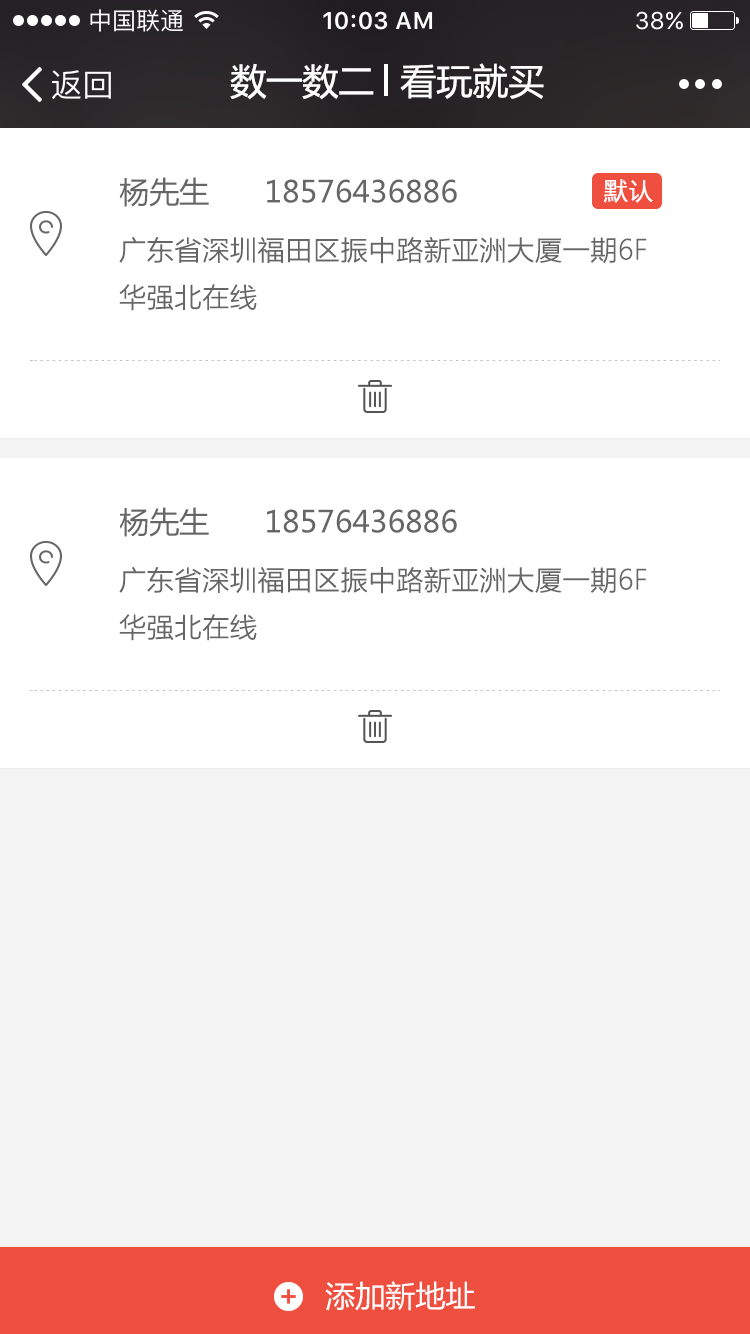
<style>
.page{position:relative;width:750px;height:1334px;background:#ffffff}
.page>*{position:absolute;margin:0}
.t1{font:36px "MicrosoftYaHei";color:#ffffff}
.t2{font:30px "MicrosoftYaHei";color:#666666}
.t3{font:24px "MicrosoftYaHeiLight";color:#ffffff;font-weight:bold}
.t4{font:27px "MicrosoftYaHeiLight";color:#666666;font-weight:bold}
.t5{font:30px "MicrosoftYaHei";color:#ffffff}
</style>
<div class="page">
<p class="t1" style="left:230px;top:63px;width:144px;height:37px">数一数二</p>
<p class="t1" style="left:400px;top:63px;width:144px;height:36px">看玩就买</p>
<p class="t2" style="left:119px;top:177px;width:90px;height:30px">杨先生</p>
<p class="t2" style="left:267px;top:179px;width:190px;height:24px">18576436886</p>
<p class="t3" style="left:603px;top:179px;width:50px;height:24px">默认</p>
<p class="t4" style="left:119px;top:237px;width:528px;height:74px">广东省深圳福田区振中路新亚洲大厦一期6F 华强北在线</p>
<p class="t2" style="left:119px;top:507px;width:90px;height:30px">杨先生</p>
<p class="t2" style="left:267px;top:509px;width:190px;height:24px">18576436886</p>
<p class="t4" style="left:119px;top:567px;width:528px;height:74px">广东省深圳福田区振中路新亚洲大厦一期6F 华强北在线</p>
<p class="t5" style="left:325px;top:1281px;width:150px;height:30px">添加新地址</p>
</div>
